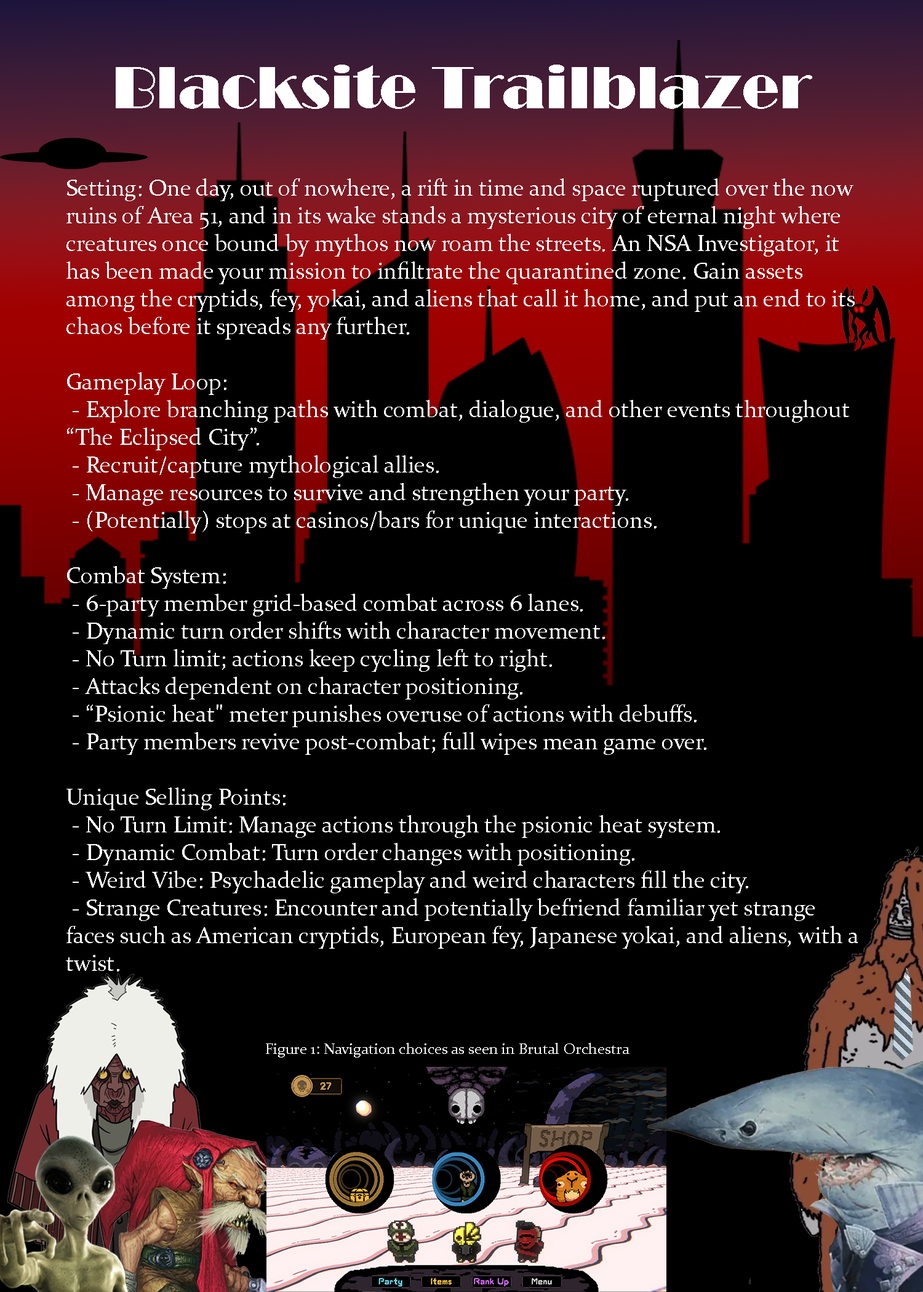
<style>
.page{position:relative;width:923px;height:1292px;background:#000000}
.page>*{position:absolute;margin:0}
.t1{font:61.5px "Broadway";color:#ffffff}
.t2{font:23.1px "Constantia";color:#ffffff}
.t3{font:15.4px "Constantia";color:#ffffff}
</style>
<div class="page">
<p class="t1" style="left:116px;top:65px;width:696px;height:44px">Blacksite Trailblazer</p>
<p class="t2" style="left:66px;top:178px;width:792px;height:880px">Setting: One day, out of nowhere, a rift in time and space ruptured over the now ruins of Area 51, and in its wake stands a mysterious city of eternal night where creatures once bound by mythos now roam the streets. An NSA Investigator, it has been made your mission to infiltrate the quarantined zone. Gain assets among the cryptids, fey, yokai, and aliens that call it home, and put an end to its chaos before it spreads any further.<br><br>Gameplay Loop:<br> - Explore branching paths with combat, dialogue, and other events throughout “The Eclipsed City”.<br> - Recruit/capture mythological allies.<br> - Manage resources to survive and strengthen your party.<br> - (Potentially) stops at casinos/bars for unique interactions.<br><br>Combat System:<br> - 6-party member grid-based combat across 6 lanes.<br> - Dynamic turn order shifts with character movement.<br> - No Turn limit; actions keep cycling left to right.<br> - Attacks dependent on character positioning.<br> - “Psionic heat" meter punishes overuse of actions with debuffs.<br> - Party members revive post-combat; full wipes mean game over.<br><br>Unique Selling Points:<br> - No Turn Limit: Manage actions through the psionic heat system.<br> - Dynamic Combat: Turn order changes with positioning.<br> - Weird Vibe: Psychadelic gameplay and weird characters fill the city.<br> - Strange Creatures: Encounter and potentially befriend familiar yet strange faces such as American cryptids, European fey, Japanese yokai, and aliens, with a twist. <br><br><br>         <span class="t3">Figure 1: Navigation choices as seen in Brutal Orchestra</span></p>
</div>
